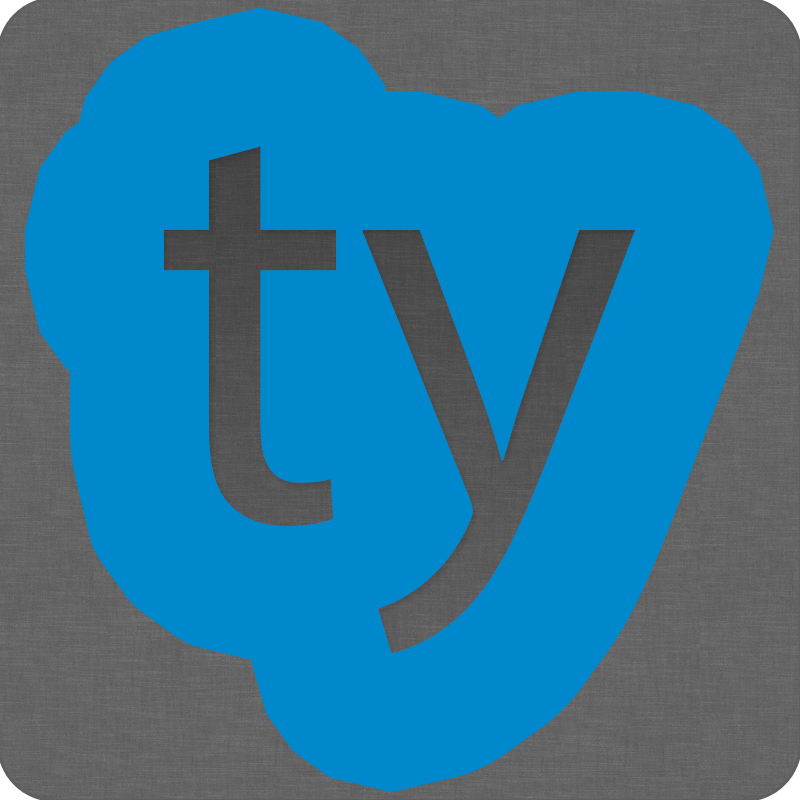
<style>
.page{position:relative;width:800px;height:800px;background:#0088cd}
.page>*{position:absolute;margin:0}
.t1{font:600px "MyriadPro-Regular";color:#505050}
</style>
<div class="page">
<p class="t1" style="left:164px;top:146px;width:471px;height:508px">ty</p>
</div>
